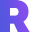
<style>
.page{position:relative;width:32px;height:32px;background:#ffffff}
.page>*{position:absolute;margin:0}
.t1{font:45.8px "Montserrat-Black";color:#6953e6}
</style>
<div class="page">
<p class="t1" style="left:0px;top:0px;width:30px;height:32px">R</p>
</div>
